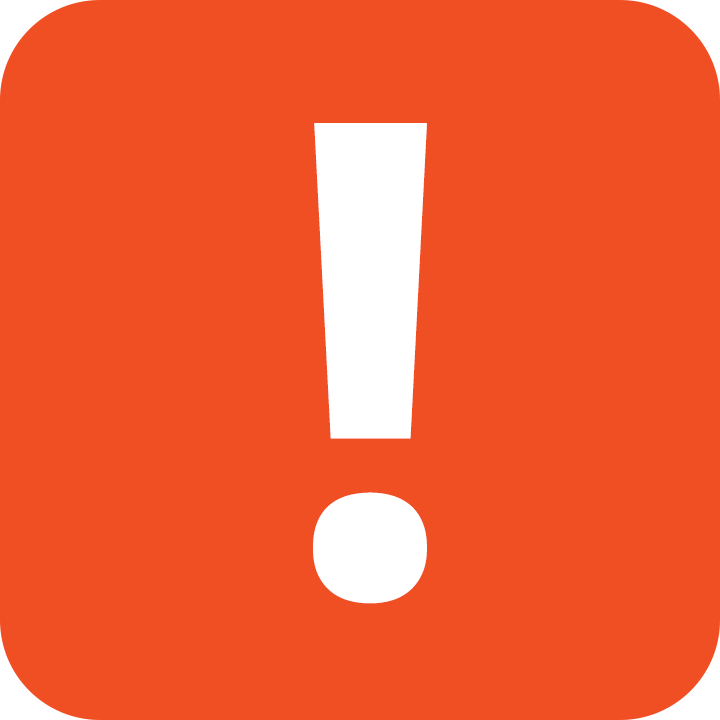
<style>
.page{position:relative;width:720px;height:720px;background:#f04e23}
.page>*{position:absolute;margin:0}
.t1{font:659px "DroidSans-Bold";letter-spacing:-0.01em;color:#ffffff;font-weight:bold}
</style>
<div class="page">
<p class="t1" style="left:313px;top:123px;width:114px;height:481px">!</p>
</div>
